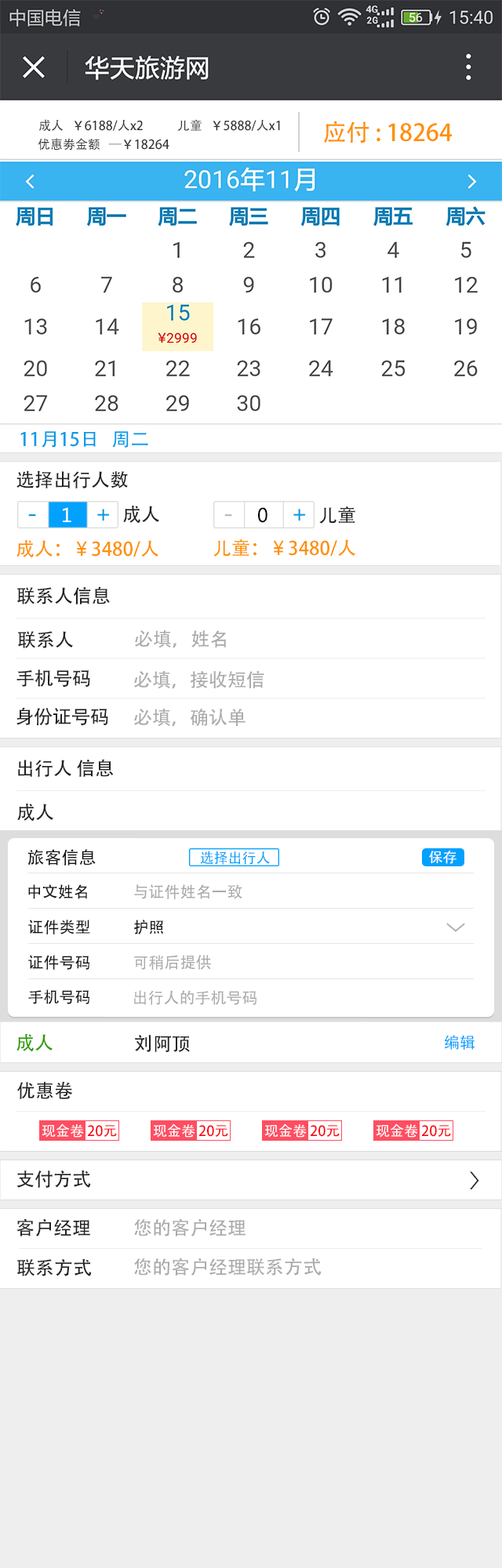
<style>
.page{position:relative;width:502px;height:1568px;background:#ffffff}
.page>*{position:absolute;margin:0}
.t1{font:12.5px "AdobeHeitiStd-Regular";color:#333333}
.t2{font:23.5px "AdobeHeitiStd-Regular";color:#fe9001}
.t3{font:18.8px "AdobeHeitiStd-Regular";color:#019ce7}
.t4{font:18.8px "AdobeHeitiStd-Regular";color:#1f1f1f}
.t5{font:23.5px "MicrosoftYaHei";color:#029be5}
.t6{font:18.8px "MicrosoftYaHei";color:#ffffff}
.t7{font:18.8px "AdobeHeitiStd-Regular";color:#222222}
.t8{font:23.5px "MicrosoftYaHei";color:#bbbbbb}
.t9{font:18.8px "MicrosoftYaHei";color:#000000}
.t10{font:18.8px "AdobeHeitiStd-Regular";color:#fe9001}
.t11{font:18.8px "MicrosoftYaHei";color:#fe9001}
.t12{font:18.8px "AdobeHeitiStd-Regular";color:#aaaaaa}
.t13{font:17.2px "AdobeHeitiStd-Regular";color:#111111}
.t14{font:14.2px "AdobeHeitiStd-Regular";color:#02a1fd}
.t15{font:14.1px "AdobeHeitiStd-Regular";color:#ffffff}
.t16{font:15.7px "AdobeHeitiStd-Regular";color:#111111}
.t17{font:15.7px "AdobeHeitiStd-Regular";color:#aaaaaa}
.t18{font:18.9px "AdobeHeitiStd-Regular";color:#aaaaaa;scale:1.29 1}
.t19{font:18.8px "AdobeHeitiStd-Regular";color:#2d9d01}
.t20{font:15.7px "AdobeHeitiStd-Regular";color:#02a1fd}
.t21{font:18.9px "AdobeHeitiStd-Regular";color:#222222;scale:1.29 1}
</style>
<div class="page">
<p class="t1" style="left:38px;top:119px;width:242px;height:13px">成人   ￥6188/人x2            儿童   ￥5888/人x1</p>
<p class="t2" style="left:323px;top:121px;width:129px;height:22px">应付 : 18264</p>
<p class="t1" style="left:38px;top:138px;width:131px;height:13px">优惠劵金额   —￥18264</p>
<p class="t3" style="left:20px;top:431px;width:128px;height:17px">11月15日   周二</p>
<p class="t4" style="left:16px;top:470px;width:112px;height:18px">选择出行人数</p>
<p class="t5" style="left:28px;top:507px;width:81px;height:15px">-                <span class="t6">1    </span>+</p>
<p class="t7" style="left:123px;top:505px;width:36px;height:18px">成人</p>
<p class="t8" style="left:224px;top:507px;width:81px;height:16px">-                <span class="t9">0    </span><span class="t5">+</span></p>
<p class="t7" style="left:319px;top:506px;width:36px;height:18px">儿童</p>
<p class="t10" style="left:16px;top:539px;width:142px;height:18px">成人：<span class="t11">￥</span>3480/人</p>
<p class="t10" style="left:213px;top:539px;width:142px;height:18px">儿童：<span class="t11">￥</span>3480/人</p>
<p class="t4" style="left:17px;top:586px;width:93px;height:18px">联系人信息</p>
<p class="t12" style="left:135px;top:630px;width:91px;height:18px">必填，姓名</p>
<p class="t7" style="left:18px;top:631px;width:55px;height:17px">联系人</p>
<p class="t7" style="left:16px;top:670px;width:74px;height:18px">手机号码</p>
<p class="t12" style="left:134px;top:670px;width:130px;height:19px">必填，接收短信</p>
<p class="t7" style="left:16px;top:707px;width:92px;height:19px">身份证号码</p>
<p class="t12" style="left:134px;top:708px;width:111px;height:19px">必填，确认单</p>
<p class="t4" style="left:18px;top:759px;width:96px;height:18px">出行人 信息</p>
<p class="t7" style="left:17px;top:803px;width:36px;height:18px">成人</p>
<p class="t13" style="left:27px;top:849px;width:69px;height:17px">旅客信息</p>
<p class="t14" style="left:200px;top:851px;width:70px;height:14px">选择出行人</p>
<p class="t15" style="left:429px;top:851px;width:27px;height:13px">保存</p>
<p class="t16" style="left:28px;top:884px;width:59px;height:15px">中文姓名</p>
<p class="t17" style="left:134px;top:884px;width:108px;height:15px">与证件姓名一致</p>
<p class="t16" style="left:28px;top:920px;width:62px;height:15px">证件类型</p>
<p class="t16" style="left:133px;top:920px;width:31px;height:15px">护照</p>
<p class="t18" style="left:446px;top:923px;width:19px;height:9px;rotate:-90deg">〈</p>
<p class="t16" style="left:28px;top:955px;width:61px;height:15px">证件号码</p>
<p class="t17" style="left:134px;top:955px;width:77px;height:15px">可稍后提供</p>
<p class="t16" style="left:28px;top:989px;width:61px;height:15px">手机号码</p>
<p class="t17" style="left:134px;top:990px;width:122px;height:15px">出行人的手机号码</p>
<p class="t19" style="left:16px;top:1033px;width:37px;height:18px">成人</p>
<p class="t7" style="left:135px;top:1035px;width:55px;height:17px">刘阿顶</p>
<p class="t20" style="left:444px;top:1035px;width:30px;height:15px">编辑</p>
<p class="t7" style="left:17px;top:1081px;width:56px;height:18px">优惠卷</p>
<p class="t7" style="left:16px;top:1170px;width:75px;height:18px">支付方式</p>
<p class="t21" style="left:470px;top:1171px;width:9px;height:18px;rotate:180deg">〈</p>
<p class="t7" style="left:16px;top:1218px;width:74px;height:18px">客户经理</p>
<p class="t12" style="left:134px;top:1218px;width:111px;height:18px">您的客户经理</p>
<p class="t7" style="left:17px;top:1258px;width:75px;height:18px">联系方式</p>
<p class="t12" style="left:134px;top:1258px;width:187px;height:18px">您的客户经理联系方式</p>
</div>
